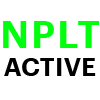
<style>
.page{position:relative;width:100px;height:100px;background:#ffffff}
.page>*{position:absolute;margin:0}
.t1{font:37.5px "HKSSansOffice-Bold";letter-spacing:0.05em;color:#00ff0c}
.t2{font:25px "HKSSansOffice-Bold";color:#000000}
</style>
<div class="page">
<p class="t1" style="left:3px;top:21px;width:96px;height:27px">NPLT</p>
<p class="t2" style="left:4px;top:58px;width:92px;height:18px">ACTIVE</p>
</div>
